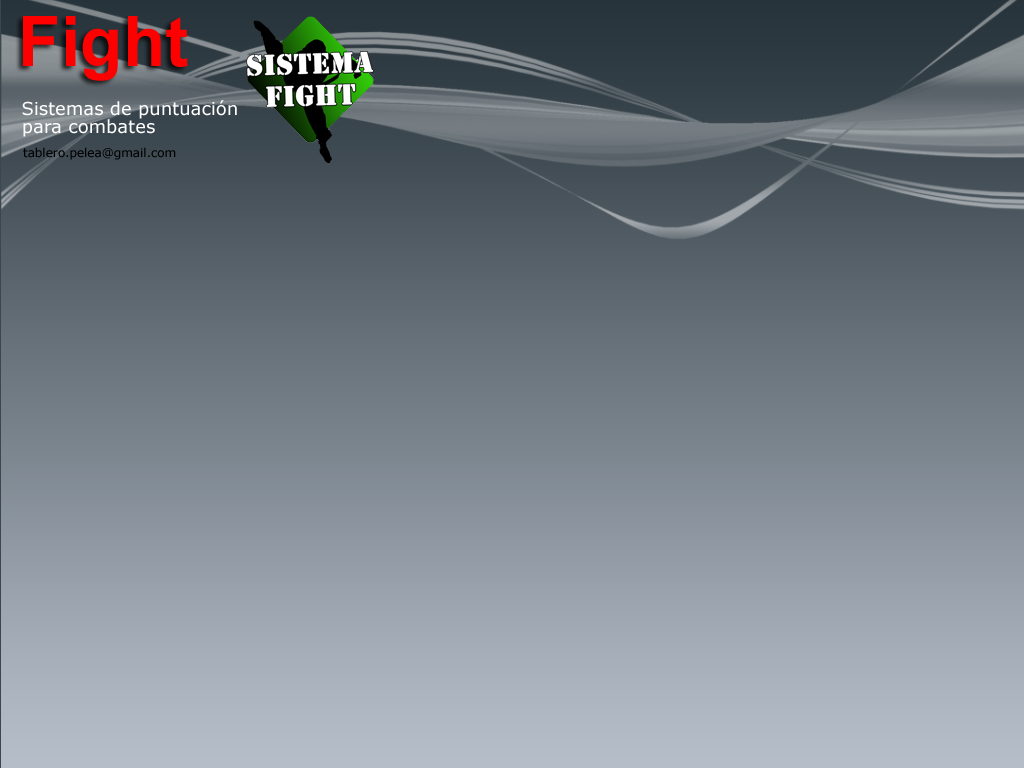
<style>
.page{position:relative;width:1024px;height:768px}
.page>*{position:absolute;margin:0}
.t1{font:69.7px "Arial-BoldMT";color:#ff0000}
.t2{font:18px "Verdana";color:#ffffff}
.t3{font:12px "Verdana";color:#000000}
</style>
<div class="page">
<p class="t1" style="left:23px;top:16px;width:165px;height:65px">Fight</p>
<p class="t2" style="left:22px;top:100px;width:215px;height:19px">Sistemas de puntuación</p>
<p class="t2" style="left:23px;top:119px;width:132px;height:18px">para combates</p>
<p class="t3" style="left:23px;top:147px;width:153px;height:13px">tablero.pelea@gmail.com</p>
</div>
